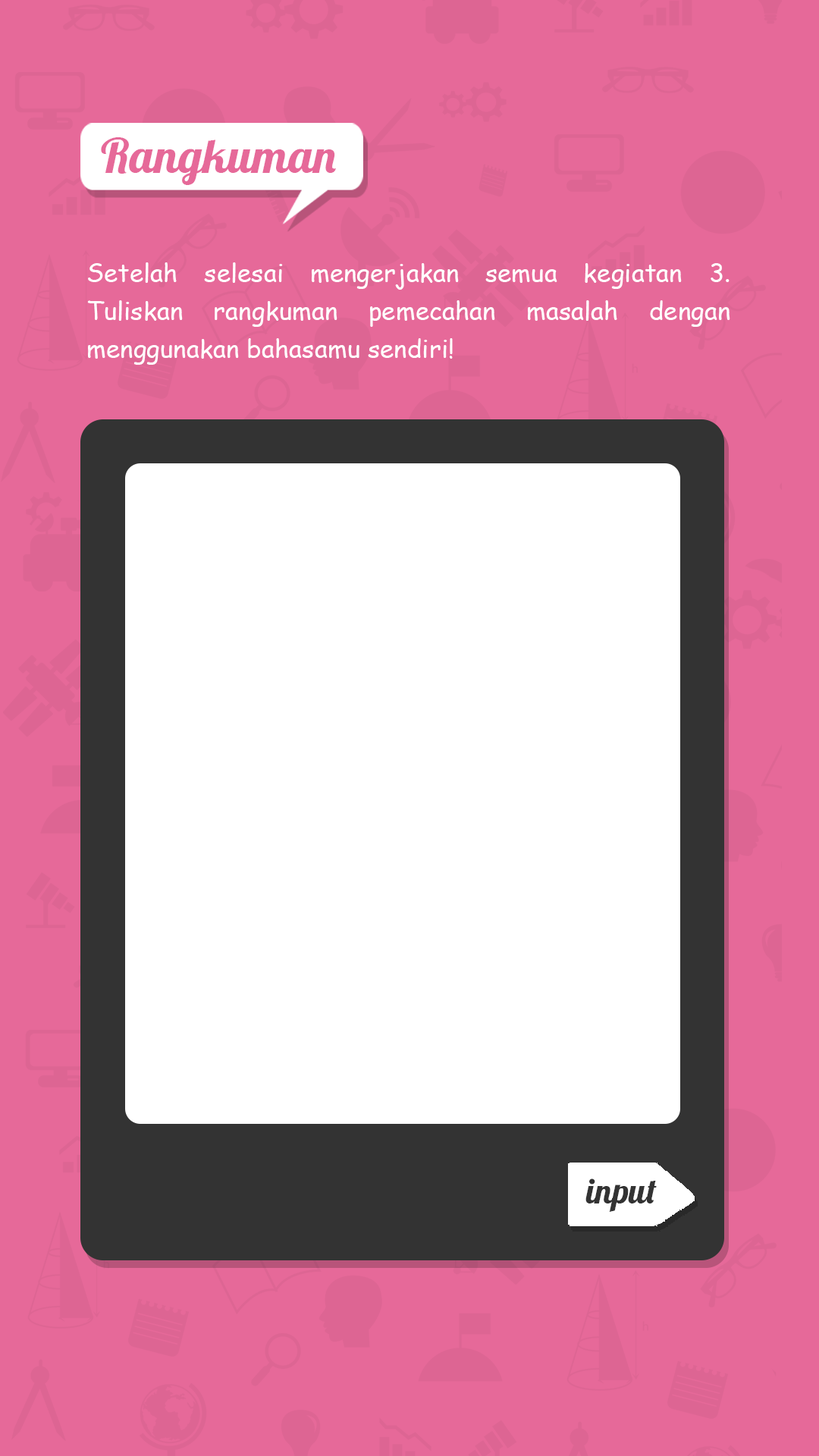
<style>
.page{position:relative;width:819px;height:1456px;background:#e66999}
.page>*{position:absolute;margin:0}
.t1{font:48px "Lobster-Regular";color:#e66999}
.t2{font:25.3px/37.9px "ComicSansMS";color:#ffffff}
.t3{font:34.8px "Lobster-Regular";color:#333333}
</style>
<div class="page">
<p class="t1" style="left:101px;top:137px;width:235px;height:48px">Rangkuman</p>
<p class="t2" style="left:87px;top:262px;width:643px;height:103px;text-align:justify">Setelah selesai mengerjakan semua kegiatan 3. Tuliskan rangkuman pemecahan masalah dengan menggunakan bahasamu sendiri!</p>
<p class="t3" style="left:585px;top:1178px;width:72px;height:34px">input</p>
</div>
